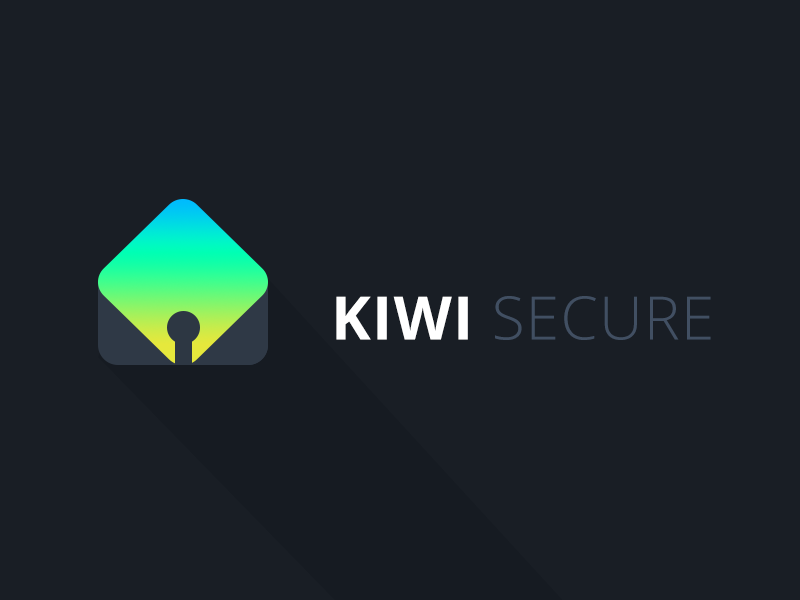
<style>
.page{position:relative;width:800px;height:600px;background:#191e25}
.page>*{position:absolute;margin:0}
.t1{font:60px "OpenSans-Light";letter-spacing:0.025em;color:#414f62}
.t2{font:60px "OpenSans-Bold";letter-spacing:0.025em;color:#ffffff}
</style>
<div class="page">
<p class="t1" style="left:336px;top:296px;width:375px;height:44px"><span class="t2">KIWI </span>SECURE</p>
</div>
